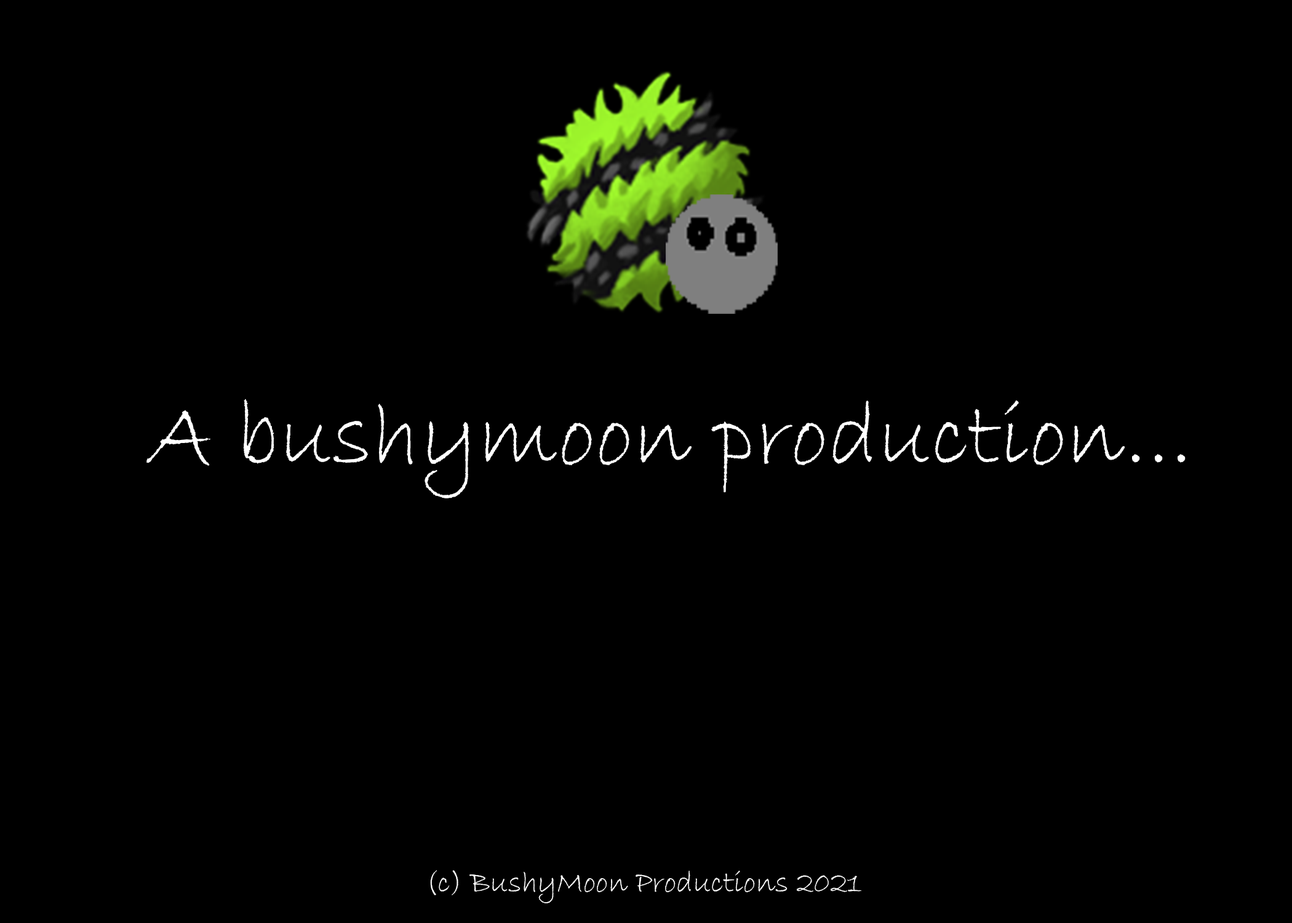
<style>
.page{position:relative;width:1292px;height:923px;background:#000000}
.page>*{position:absolute;margin:0}
.t1{font:92.3px "BradleyHandITC";color:#ffffff}
.t2{font:7.4px "BradleyHandITC";color:#ffffff}
</style>
<div class="page">
<p class="t1" style="left:146px;top:399px;width:1040px;height:99px">A bushymoon production...</p>
<p class="t2" style="left:430px;top:870px;width:432px;height:33px">(c) BushyMoon Productions 2021</p>
</div>
